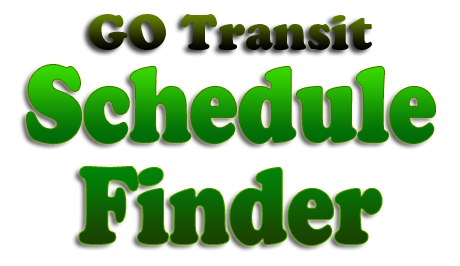
<style>
.page{position:relative;width:460px;height:266px;background:#ffffff}
.page>*{position:absolute;margin:0}
.t1{font:48px "CooperBlackStd"}
.t2{font:105.5px "CooperBlackStd";scale:0.81 1}
.t3{font:107.3px "CooperBlackStd";scale:0.79 1}
</style>
<div class="page">
<p class="t1" style="left:89px;top:14px;width:283px;height:36px">GO Transit</p>
<p class="t2" style="left:27px;top:65px;width:408px;height:79px">Schedule</p>
<p class="t3" style="left:79px;top:166px;width:303px;height:80px">Finder</p>
</div>
